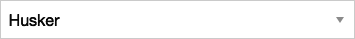
<style>
.page{position:relative;width:355px;height:39px;background:#ffffff}
.page>*{position:absolute;margin:0}
.t1{font:12px "MyriadPro-Regular";color:#000000}
</style>
<div class="page">
<p class="t1" style="left:9px;top:14px;width:51px;height:13px">Husker</p>
</div>
